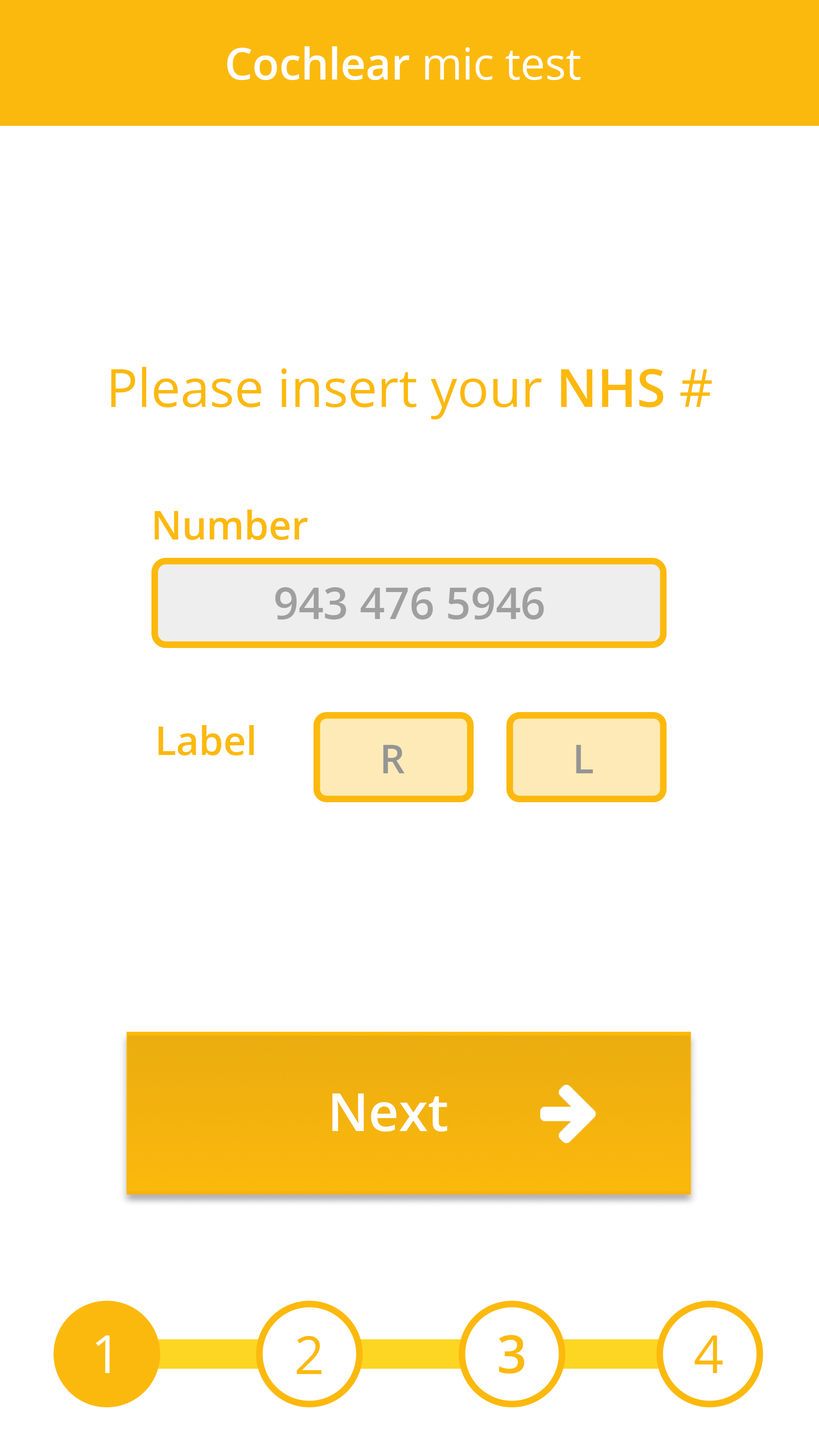
<style>
.page{position:relative;width:819px;height:1456px;background:#ffffff}
.page>*{position:absolute;margin:0}
.t1{font:43.7px "OpenSans-Semibold";color:#ffffff}
.t2{font:43.7px "OpenSans";color:#ffffff}
.t3{font:52.4px "OpenSans";color:#fcb90d}
.t4{font:52.4px "OpenSans-Semibold";color:#fcb90d}
.t5{font:39.3px "OpenSans-Semibold";color:#fcb90d}
.t6{font:43.7px "OpenSans-Semibold";color:#959595}
.t7{font:39.3px "OpenSans-Semibold";color:#959595}
.t8{font:52.4px "OpenSans-Semibold";color:#ffffff}
.t9{font:52.4px "OpenSans";color:#ffffff}
</style>
<div class="page">
<p class="t1" style="left:227px;top:46px;width:354px;height:34px">Cochlear <span class="t2">mic test</span></p>
<p class="t3" style="left:111px;top:367px;width:601px;height:53px">Please insert your <span class="t4">NHS</span> #</p>
<p class="t5" style="left:154px;top:510px;width:154px;height:30px">Number</p>
<p class="t6" style="left:275px;top:587px;width:269px;height:33px;opacity:0.9">943 476 5946</p>
<p class="t5" style="left:158px;top:725px;width:96px;height:31px">Label</p>
<p class="t7" style="left:383px;top:745px;width:22px;height:28px">R</p>
<p class="t7" style="left:576px;top:745px;width:17px;height:28px">L</p>
<p class="t8" style="left:332px;top:1094px;width:115px;height:38px">Next</p>
<p class="t9" style="left:95px;top:1336px;width:15px;height:37px">1</p>
<p class="t3" style="left:297px;top:1336px;width:25px;height:38px">2</p>
<p class="t4" style="left:499px;top:1335px;width:25px;height:39px">3</p>
<p class="t3" style="left:694px;top:1336px;width:29px;height:37px">4</p>
</div>
